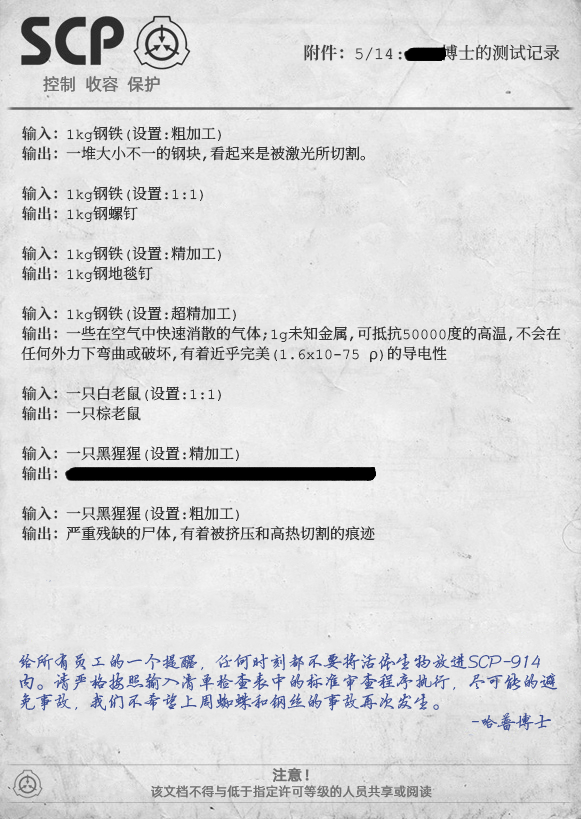
<style>
.page{position:relative;width:581px;height:819px}
.page>*{position:absolute;margin:0}
.t1{font:17px "ContainmentBreach-Regular";color:#434343}
.t2{font:17px "ContainmentBreach-Bold";color:#434343}
.t3{font:17px "AlibabaPuHuiTiR";color:#707070}
.t4{font:15px/20px "ContainmentBreach-Regular";color:#353535}
.t5{font:15px/20px "ContainmentBreach-Bold";color:#353535}
.t6{font:18px/20px "FZYBXSJW--GB1-0";color:#32448e}
.t7{font:15px "AlibabaPuHuiTiR";color:#707070;font-weight:bold}
.t8{font:13px "AlibabaPuHuiTiR";color:#707070}
</style>
<div class="page">
<p class="t1" style="left:304px;top:44px;width:256px;height:17px"><span class="t2">附件：</span>5/14:     博士的测试记录</p>
<p class="t3" style="left:43px;top:76px;width:117px;height:16px">控制  收容  保护</p>
<p class="t4" style="left:21px;top:126px;width:540px;height:416px"><span class="t5">输入：</span>1kg钢铁（设置：粗加工）<br><span class="t5">输出：</span>一堆大小不一的钢块，看起来是被激光所切割。<br><br><span class="t5">输入：</span>1kg钢铁（设置：1:1）<br><span class="t5">输出：</span>1kg钢螺钉<br><br><span class="t5">输入：</span>1kg钢铁（设置：精加工）<br><span class="t5">输出：</span>1kg钢地毯钉<br><br><span class="t5">输入：</span>1kg钢铁（设置：超精加工）<br><span class="t5">输出：</span>一些在空气中快速消散的气体；1g未知金属，可抵抗50000度的高温，不会在<br>任何外力下弯曲或破坏，有着近乎完美（1.6x10-75 ρ）的导电性<br><br><span class="t5">输入：</span>一只白老鼠（设置：1:1）<br><span class="t5">输出：</span>一只棕老鼠<br><br><span class="t5">输入：</span>一只黑猩猩（设置：精加工）<br><span class="t5">输出：<br><br>输入：</span>一只黑猩猩（设置：粗加工）<br><span class="t5">输出：</span>严重残缺的尸体，有着被挤压和高热切割的痕迹</p>
<p class="t6" style="left:19px;top:652px;width:539px;height:79px">给所有员工的一个提醒，任何时刻都不要将活体生物放进SCP-914<br>内。请严格按照输入清单检查表中的标准审查程序执行，尽可能的避<br>免事故，我们不希望上周蜘蛛和钢丝的事故再次发生。<br>                                                                                                   -哈普博士</p>
<p class="t7" style="left:272px;top:767px;width:37px;height:15px">注意！</p>
<p class="t8" style="left:151px;top:785px;width:281px;height:13px">该文档不得与低于指定许可等级的人员共享或阅读</p>
</div>
